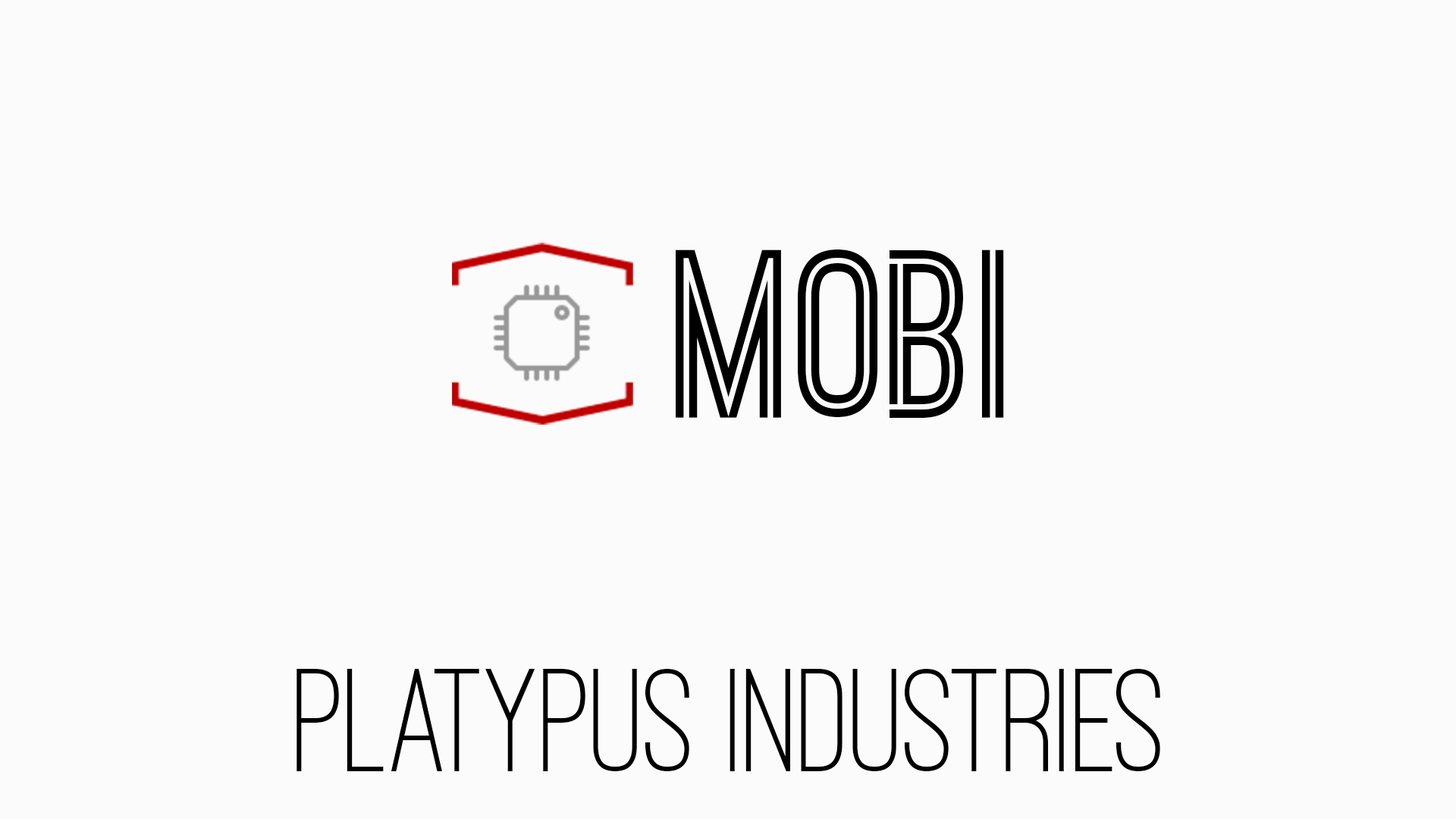
<style>
.page{position:relative;width:1456px;height:819px;background:#fbfbfb}
.page>*{position:absolute;margin:0}
.t1{font:227.5px "OstrichSans-Bold";color:#000000}
.t2{font:151.7px "OstrichSans-Medium";color:#000000}
</style>
<div class="page">
<p class="t1" style="left:676px;top:249px;width:328px;height:169px">Mobi</p>
<p class="t2" style="left:297px;top:669px;width:863px;height:102px">Platypus Industries</p>
</div>
